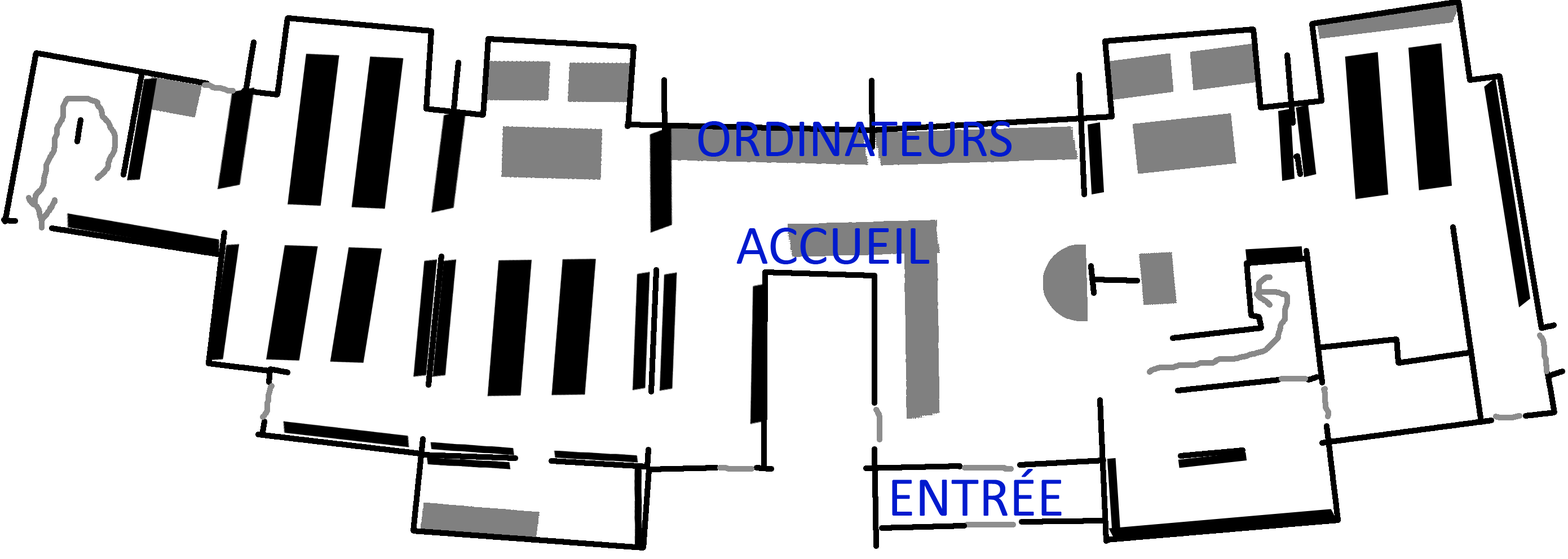
<style>
.page{position:relative;width:1568px;height:559px;background:#ffffff}
.page>*{position:absolute;margin:0}
.t1{font:54.5px "Calibri";color:#001ace}
.t2{font:56.4px "Calibri";color:#001ace}
.t3{font:56.6px "Calibri";color:#001ace}
</style>
<div class="page">
<p class="t1" style="left:698px;top:121px;width:314px;height:36px">ORDINATEURS</p>
<p class="t2" style="left:736px;top:228px;width:194px;height:36px">ACCUEIL</p>
<p class="t3" style="left:892px;top:469px;width:170px;height:47px">ENTRÉE</p>
</div>
